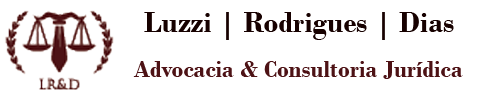
<style>
.page{position:relative;width:500px;height:100px;background:#ffffff}
.page>*{position:absolute;margin:0}
.t1{font:30px "BodoniMT-Bold";color:#170100}
.t2{font:24px "BodoniMT-Bold";color:#4d1215}
</style>
<div class="page">
<p class="t1" style="left:144px;top:12px;width:310px;height:28px">Luzzi | Rodrigues | Dias</p>
<p class="t2" style="left:133px;top:61px;width:330px;height:18px">Advocacia &amp; Consultoria Jurídica</p>
</div>
